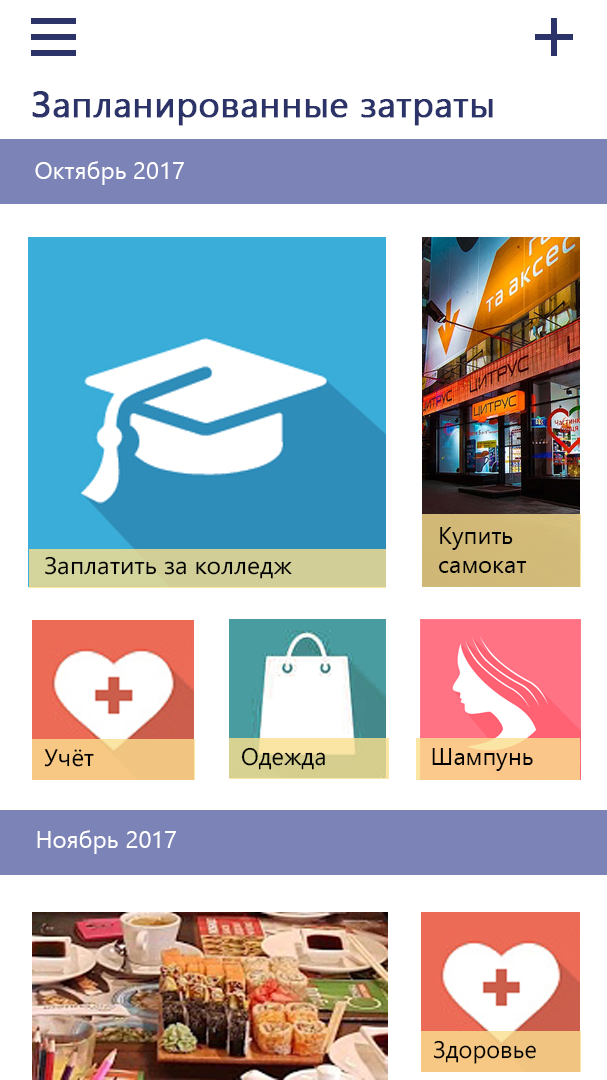
<style>
.page{position:relative;width:607px;height:1080px;background:#ffffff}
.page>*{position:absolute;margin:0}
.t1{font:36px "YuGothicUI-Regular";color:#2b3368;font-weight:bold}
.t2{font:24px "YuGothicUI-Regular";color:#ffffff}
.t3{font:24px "YuGothicUI-Regular";color:#000000}
.t4{font:24px "YuGothicUI-Regular";color:#010000;scale:1.03 1}
</style>
<div class="page">
<p class="t1" style="left:32px;top:91px;width:461px;height:35px">Запланированные затраты</p>
<p class="t2" style="left:35px;top:161px;width:149px;height:24px">Октябрь 2017</p>
<p class="t3" style="left:439px;top:527px;width:88px;height:46px">Купить<br>самокат</p>
<p class="t4" style="left:45px;top:556px;width:247px;height:23px">Заплатить за колледж</p>
<p class="t3" style="left:44px;top:749px;width:50px;height:18px">Учёт</p>
<p class="t3" style="left:241px;top:747px;width:84px;height:23px">Одежда</p>
<p class="t3" style="left:432px;top:748px;width:101px;height:23px">Шампунь</p>
<p class="t2" style="left:37px;top:830px;width:139px;height:24px">Ноябрь 2017</p>
<p class="t3" style="left:433px;top:1040px;width:103px;height:24px">Здоровье</p>
</div>
